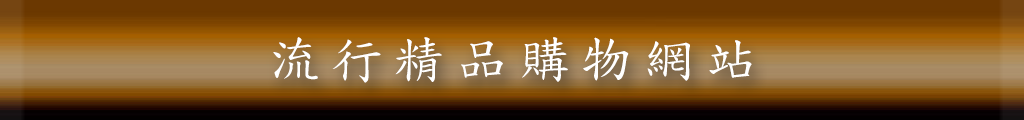
<style>
.page{position:relative;width:1024px;height:120px}
.page>*{position:absolute;margin:0}
.t1{font:52px "DFKaiShu-SB-Estd-BF";letter-spacing:0.2em;color:#ffffff}
</style>
<div class="page">
<p class="t1" style="left:273px;top:37px;width:479px;height:46px">流行精品購物網站</p>
</div>
